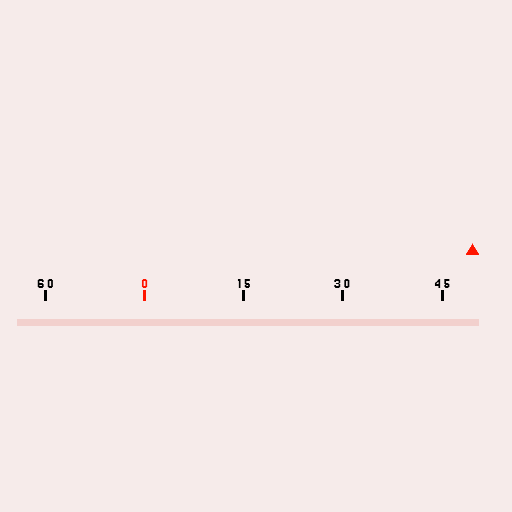
<style>
.page{position:relative;width:512px;height:512px;background:#f6ebea}
.page>*{position:absolute;margin:0}
.t1{font:16px "Jersey10-Regular";letter-spacing:0.2em;color:#000000}
.t2{font:16px "Jersey10-Regular";letter-spacing:0.2em;color:#ff1500}
</style>
<div class="page">
<p class="t1" style="left:37px;top:279px;width:16px;height:9px">60</p>
<p class="t2" style="left:141px;top:279px;width:7px;height:9px">0</p>
<p class="t1" style="left:237px;top:279px;width:13px;height:9px">15</p>
<p class="t1" style="left:334px;top:279px;width:16px;height:9px">30</p>
<p class="t1" style="left:434px;top:279px;width:16px;height:9px">45</p>
</div>
